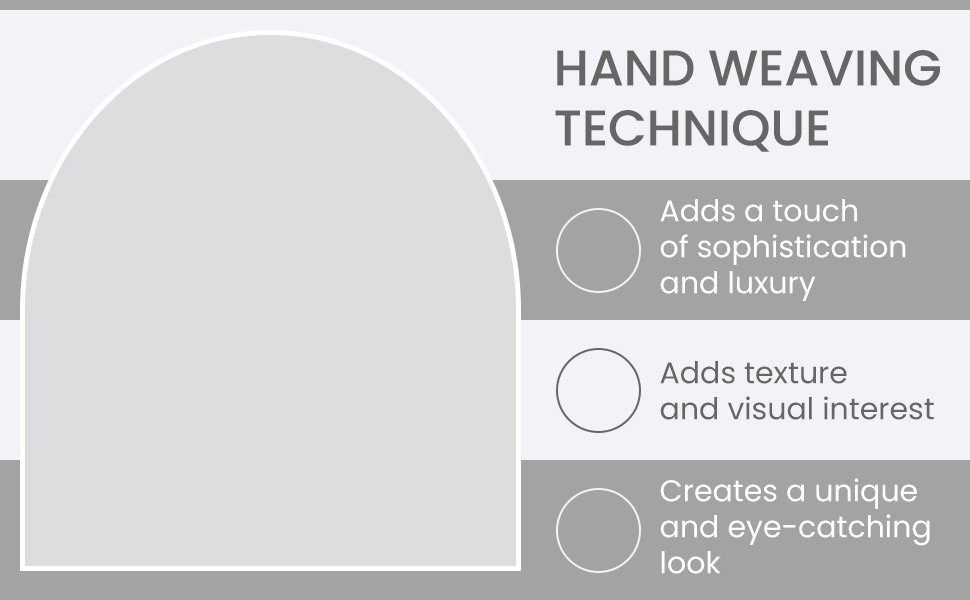
<style>
.page{position:relative;width:970px;height:600px;background:#dcdddf}
.page>*{position:absolute;margin:0}
.t1{font:50px "Poppins-Medium";color:#666666}
.t2{font:30px "Poppins-Regular";color:#ffffff}
.t3{font:30px "Poppins-Regular";color:#666666}
</style>
<div class="page">
<p class="t1" style="left:555px;top:50px;width:385px;height:102px">HAND WEAVING<br>TECHNIQUE</p>
<p class="t2" style="left:660px;top:199px;width:246px;height:102px">Adds a touch<br>of sophistication<br>and luxury</p>
<p class="t3" style="left:660px;top:361px;width:274px;height:59px">Adds texture<br>and visual interest</p>
<p class="t2" style="left:660px;top:478px;width:270px;height:96px">Creates a unique<br>and eye-catching<br>look</p>
</div>
